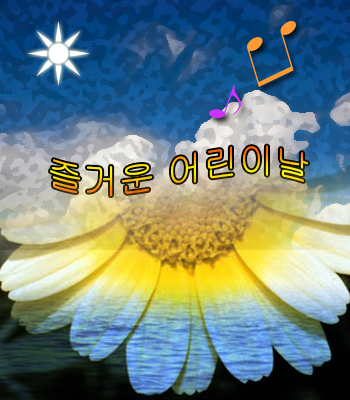
<style>
.page{position:relative;width:350px;height:400px}
.page>*{position:absolute;margin:0}
.t1{font:36px "Gulim"}
</style>
<div class="page">
<p class="t1" style="left:50px;top:145px;width:258px;height:52px">즐거운 어린이날</p>
</div>
